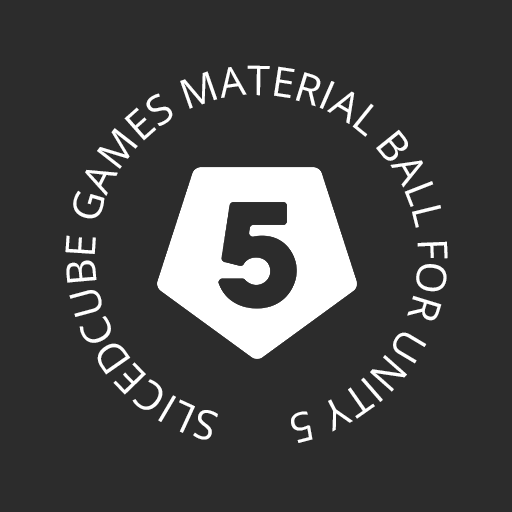
<style>
.page{position:relative;width:512px;height:512px;background:#2c2c2c}
.page>*{position:absolute;margin:0}
.t1{font:41px "OpenSans";color:#ffffff}
</style>
<div class="page">
<p class="t1" style="left:65px;top:65px;width:383px;height:378px;rotate:-79deg">SLICEDCUBE GAMES MATERIAL BALL FOR UNITY 5</p>
</div>
